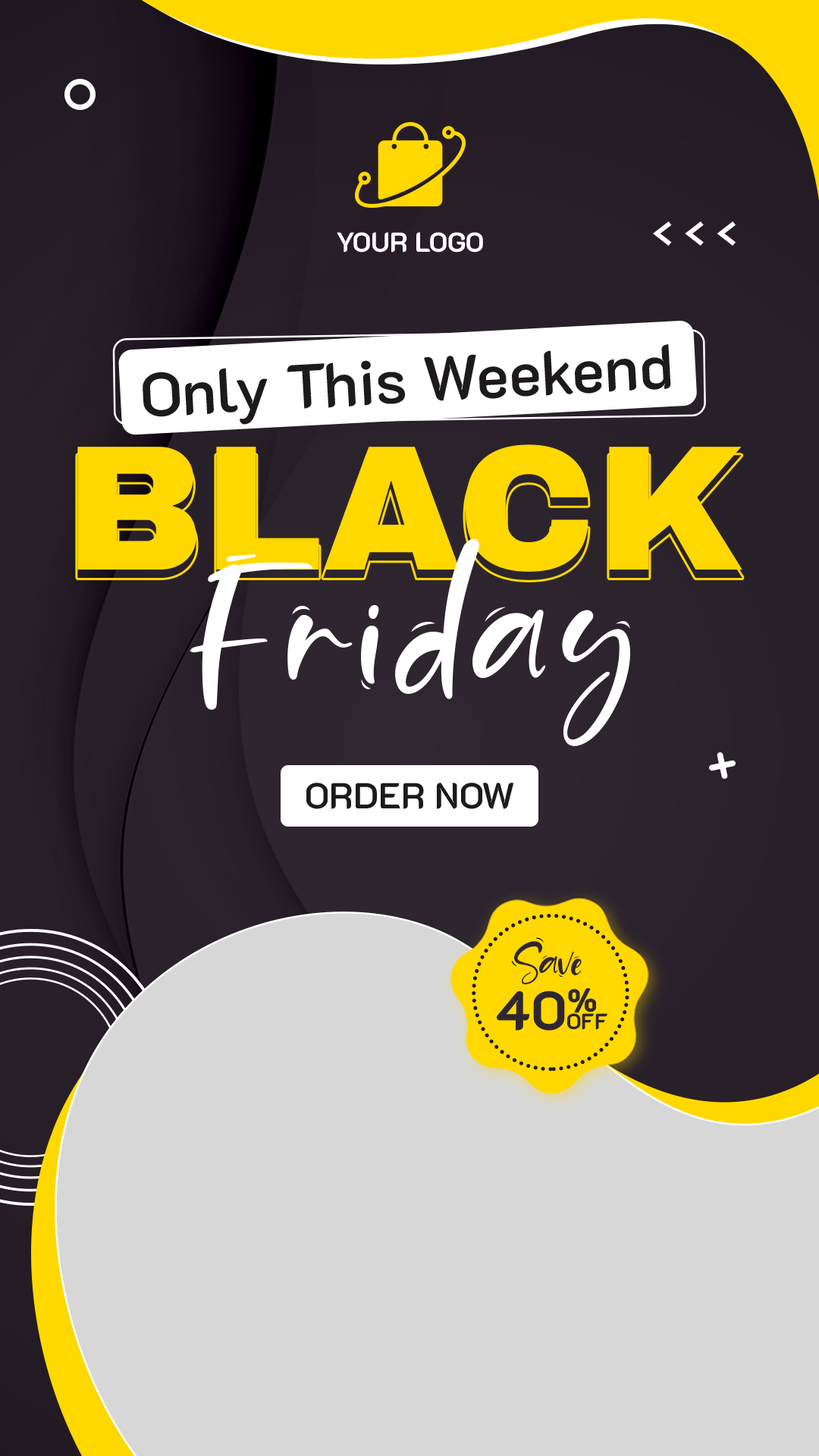
<style>
.page{position:relative;width:819px;height:1456px;background:#d7d7d7}
.page>*{position:absolute;margin:0}
.t1{font:27.4px "K2D-Bold";color:#ffffff}
.t2{font:61.7px "K2D-SemiBold";color:#1d1a1c}
.t3{font:178.3px "ArchivoBlack-Regular";color:#ffd800}
.t4{font:219.5px "Sand-Beach";letter-spacing:0.055em;color:#ffffff}
.t5{font:36.1px "K2D-SemiBold";color:#1d1a1c}
.t6{font:54.6px "Sand-Beach";color:#2f2730}
.t7{font:54.6px "K2D-Bold";color:#2f2730}
.t8{font:21.8px "K2D-Bold";color:#2f2730}
</style>
<div class="page">
<p class="t1" style="left:337px;top:232px;width:146px;height:21px">YOUR LOGO</p>
<p class="t2" style="left:143px;top:344px;width:528px;height:81px;rotate:-3deg">Only This Weekend</p>
<p class="t3" style="left:77px;top:444px;width:665px;height:128px">BLACK</p>
<p class="t3" style="left:77px;top:453px;width:665px;height:127px">BLACK</p>
<p class="t4" style="left:190px;top:538px;width:440px;height:208px">Friday</p>
<p class="t5" style="left:306px;top:783px;width:207px;height:26px">ORDER NOW</p>
<p class="t6" style="left:511px;top:937px;width:71px;height:47px">Save</p>
<p class="t7" style="left:497px;top:988px;width:99px;height:43px">40%</p>
<p class="t8" style="left:567px;top:1013px;width:40px;height:17px">OFF</p>
</div>
